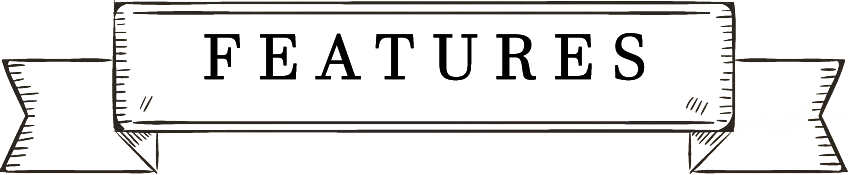
<style>
.page{position:relative;width:850px;height:175px;background:#ffffff}
.page>*{position:absolute;margin:0}
.t1{font:62.5px "JavaneseText";letter-spacing:0.241em;color:#000000;text-transform:uppercase;font-weight:bold}
</style>
<div class="page">
<p class="t1" style="left:204px;top:33px;width:441px;height:48px">features</p>
</div>
